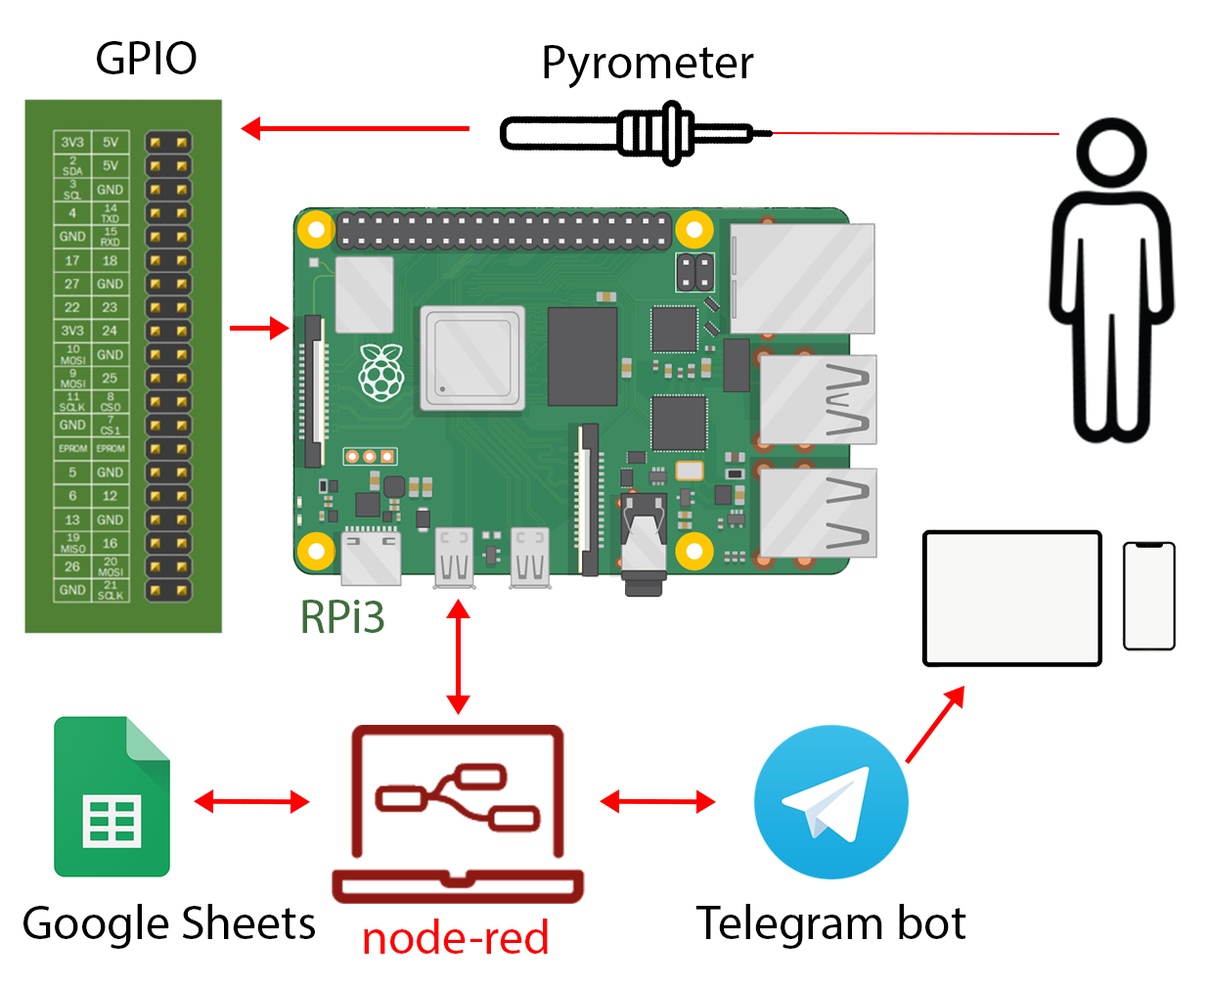
<style>
.page{position:relative;width:1208px;height:987px;background:#ffffff}
.page>*{position:absolute;margin:0}
.t1{font:48.9px "MyriadPro-Regular";color:#000000}
.t2{font:48.9px "MyriadPro-Regular";color:#3d6f3c}
.t3{font:48.9px "MyriadPro-Regular";color:#ff0000}
</style>
<div class="page">
<p class="t1" style="left:97px;top:41px;width:100px;height:33px">GPIO</p>
<p class="t1" style="left:544px;top:45px;width:210px;height:44px">Pyrometer</p>
<p class="t2" style="left:302px;top:600px;width:82px;height:33px">RPi3</p>
<p class="t1" style="left:23px;top:904px;width:292px;height:45px">Google Sheets</p>
<p class="t1" style="left:696px;top:904px;width:270px;height:45px">Telegram bot</p>
<p class="t3" style="left:364px;top:919px;width:184px;height:35px">node-red</p>
</div>
